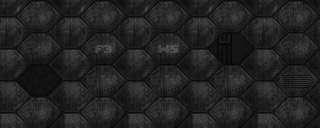
<style>
.page{position:relative;width:320px;height:128px}
.page>*{position:absolute;margin:0}
.t1{font:10px "DooM";color:#484848}
.t2{font:10px "DooM";color:#4b4b4b}
</style>
<div class="page">
<p class="t1" style="left:95px;top:45px;width:17px;height:8px">F3</p>
<p class="t2" style="left:158px;top:45px;width:21px;height:8px">W5</p>
</div>
